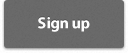
<style>
.page{position:relative;width:128px;height:53px;background:#696969}
.page>*{position:absolute;margin:0}
.t1{font:16px "MyriadPro-Bold";color:#ffffff}
</style>
<div class="page">
<p class="t1" style="left:38px;top:17px;width:52px;height:15px">Sign up</p>
</div>
